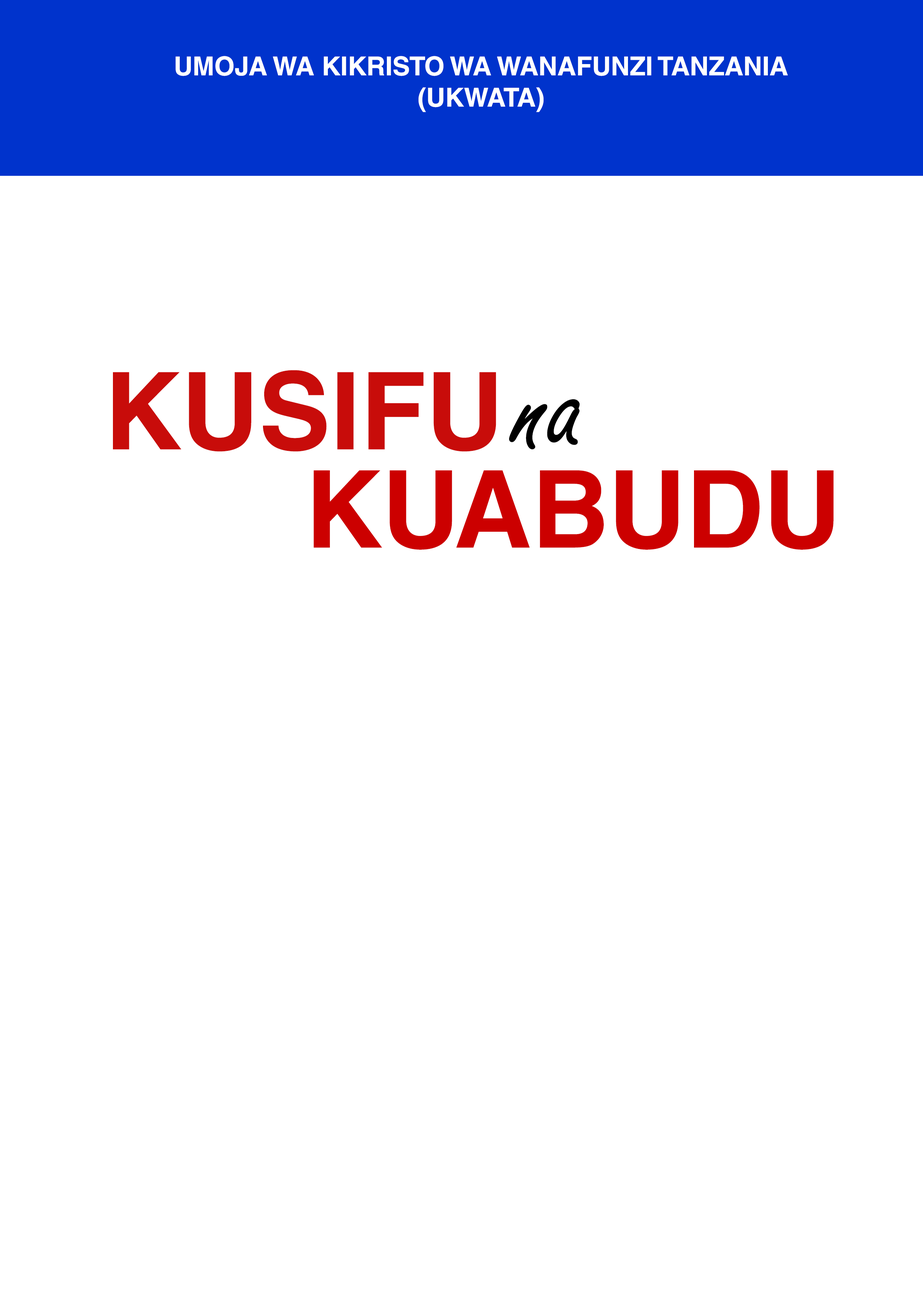
<style>
.page{position:relative;width:923px;height:1292px;background:#ffffff}
.page>*{position:absolute;margin:0}
.t1{font:26px "HelveticaLTStd-Bold";color:#ffffff}
.t2{font:107.4px "HelveticaLTStd-Bold";color:#c80c0a}
.t3{font:135.1px "FreestyleScript-Regular";color:#000000}
.t4{font:107.4px "HelveticaLTStd-Bold";color:#cc0000}
</style>
<div class="page">
<p class="t1" style="left:175px;top:56px;width:613px;height:56px;text-align:center">UMOJA WA KIKRISTO WA WANAFUNZI TANZANIA<br>(UKWATA)</p>
<p class="t2" style="left:113px;top:370px;width:383px;height:82px">KUSIFU</p>
<p class="t3" style="left:509px;top:399px;width:71px;height:50px">na</p>
<p class="t4" style="left:313px;top:470px;width:520px;height:80px">KUABUDU</p>
</div>
